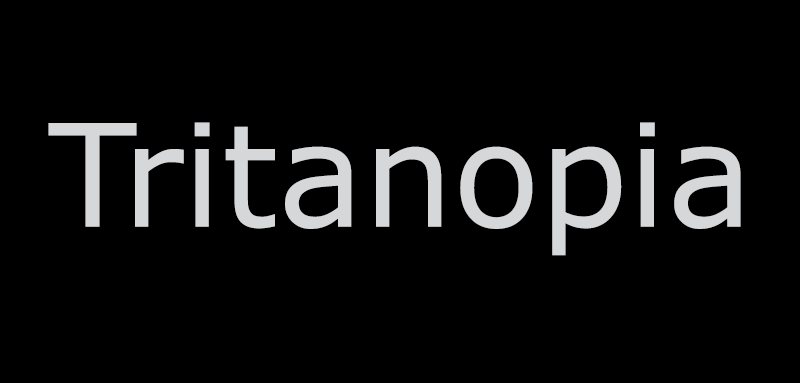
<style>
.page{position:relative;width:800px;height:383px;background:#000000}
.page>*{position:absolute;margin:0}
.t1{font:142.1px "Verdana";color:#d5d7d8}
</style>
<div class="page">
<p class="t1" style="left:48px;top:122px;width:693px;height:134px">Tritanopia</p>
</div>
